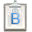
<style>
.page{position:relative;width:32px;height:32px;background:#ffffff}
.page>*{position:absolute;margin:0}
.t1{font:15px "ArialMT"}
</style>
<div class="page">
<p class="t1" style="left:11px;top:13px;width:9px;height:11px">B</p>
</div>
